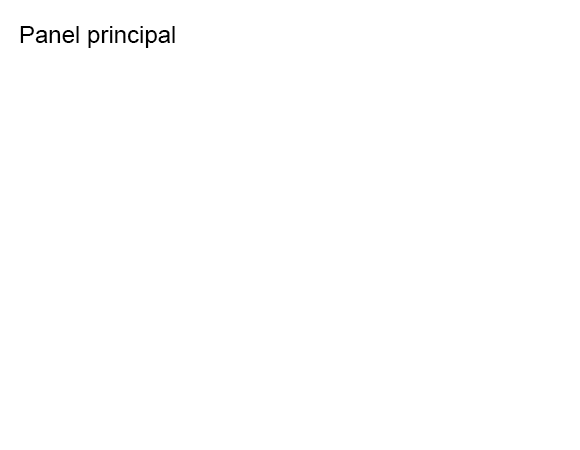
<style>
.page{position:relative;width:580px;height:450px;background:#ffffff}
.page>*{position:absolute;margin:0}
.t1{font:24px "ArialMT";color:#000000}
</style>
<div class="page">
<p class="t1" style="left:20px;top:26px;width:155px;height:22px">Panel principal</p>
</div>
